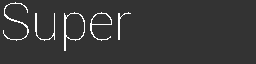
<style>
.page{position:relative;width:256px;height:64px;background:#333333}
.page>*{position:absolute;margin:0}
.t1{font:52px "Roboto-Thin";color:#ffffff}
</style>
<div class="page">
<p class="t1" style="left:3px;top:2px;width:128px;height:49px">Super</p>
</div>
